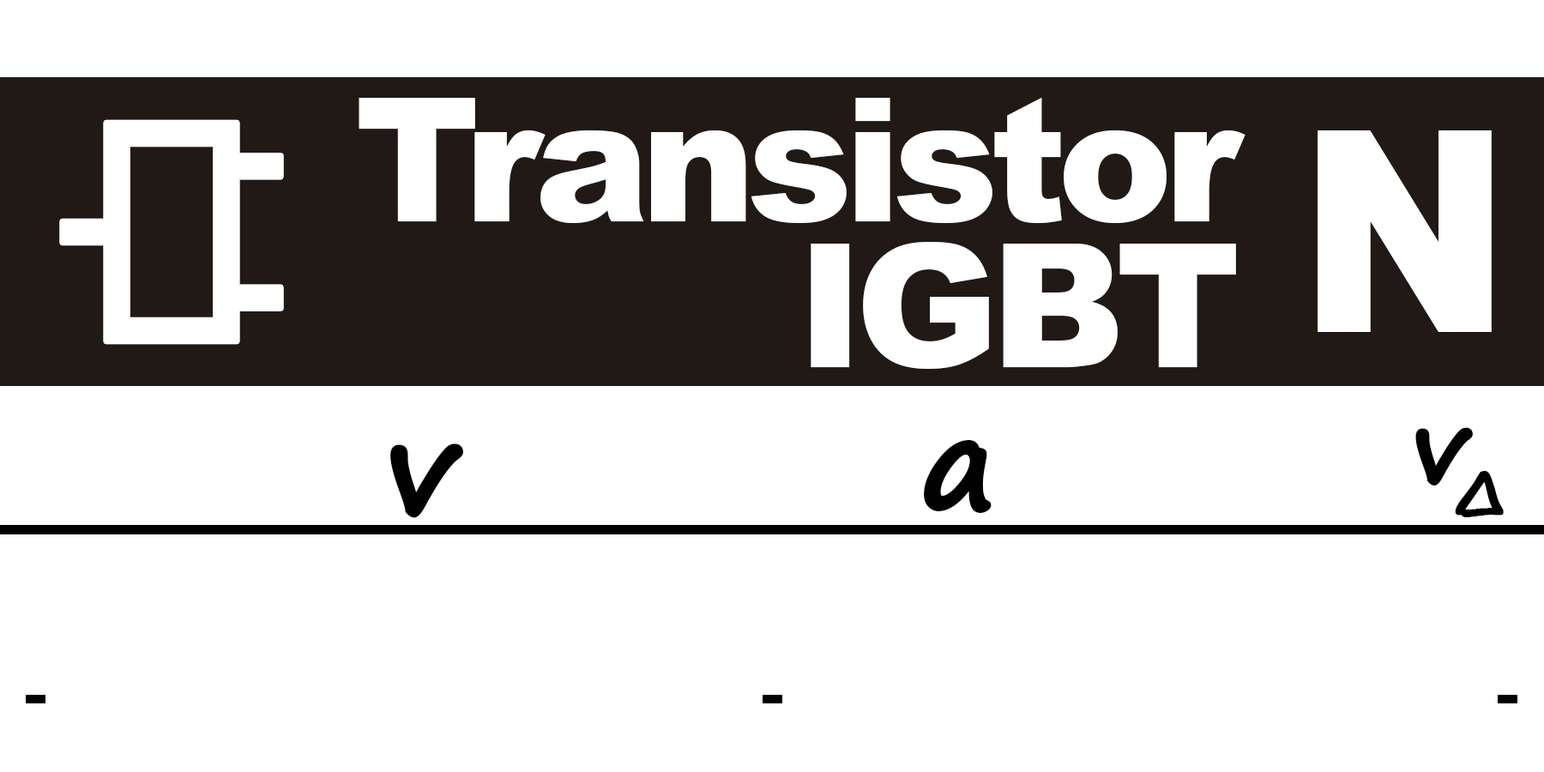
<style>
.page{position:relative;width:1544px;height:772px;background:#ffffff}
.page>*{position:absolute;margin:0}
.t1{font:172.5px/145.3px "Arial-Black";letter-spacing:-0.05em;color:#ffffff}
.t2{font:281.5px "Arial-Black";letter-spacing:-0.01em;color:#ffffff;scale:0.9 1}
.t3{font:99.9px "SegoePrint-Bold";letter-spacing:-0.175em;color:#010101;font-weight:bold}
.t4{font:127.1px "Arial-BoldMT";letter-spacing:-0.175em;color:#010101}
.t5{font:127.1px "SegoePrint-Bold";letter-spacing:-0.01em;color:#010101;font-weight:bold}
.t6{font:127.1px "Arial-BoldMT";letter-spacing:-0.01em;color:#010101}
</style>
<div class="page">
<p class="t1" style="left:359px;top:98px;width:887px;height:271px;text-align:right">Transistor<br>IGBT</p>
<p class="t2" style="left:1318px;top:130px;width:174px;height:202px">N</p>
<p class="t3" style="left:1416px;top:427px;width:88px;height:90px"><span class="t4"> </span>vΔ</p>
<p class="t5" style="left:390px;top:444px;width:74px;height:74px">v</p>
<p class="t5" style="left:924px;top:439px;width:68px;height:75px"><span class="t6">   </span>a</p>
</div>
